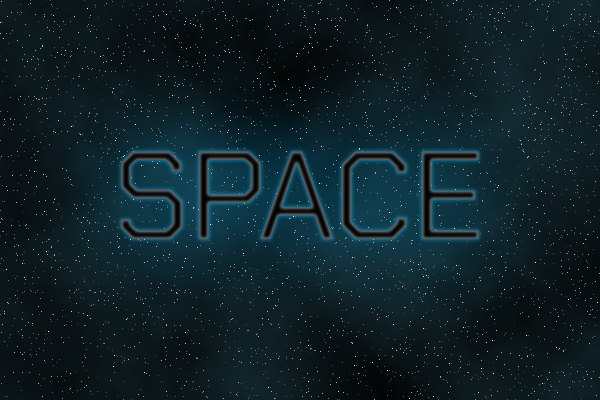
<style>
.page{position:relative;width:600px;height:400px}
.page>*{position:absolute;margin:0}
.t1{font:125px "ChakraPetch-Regular"}
</style>
<div class="page">
<p class="t1" style="left:121px;top:151px;width:358px;height:88px">SPACE</p>
</div>
